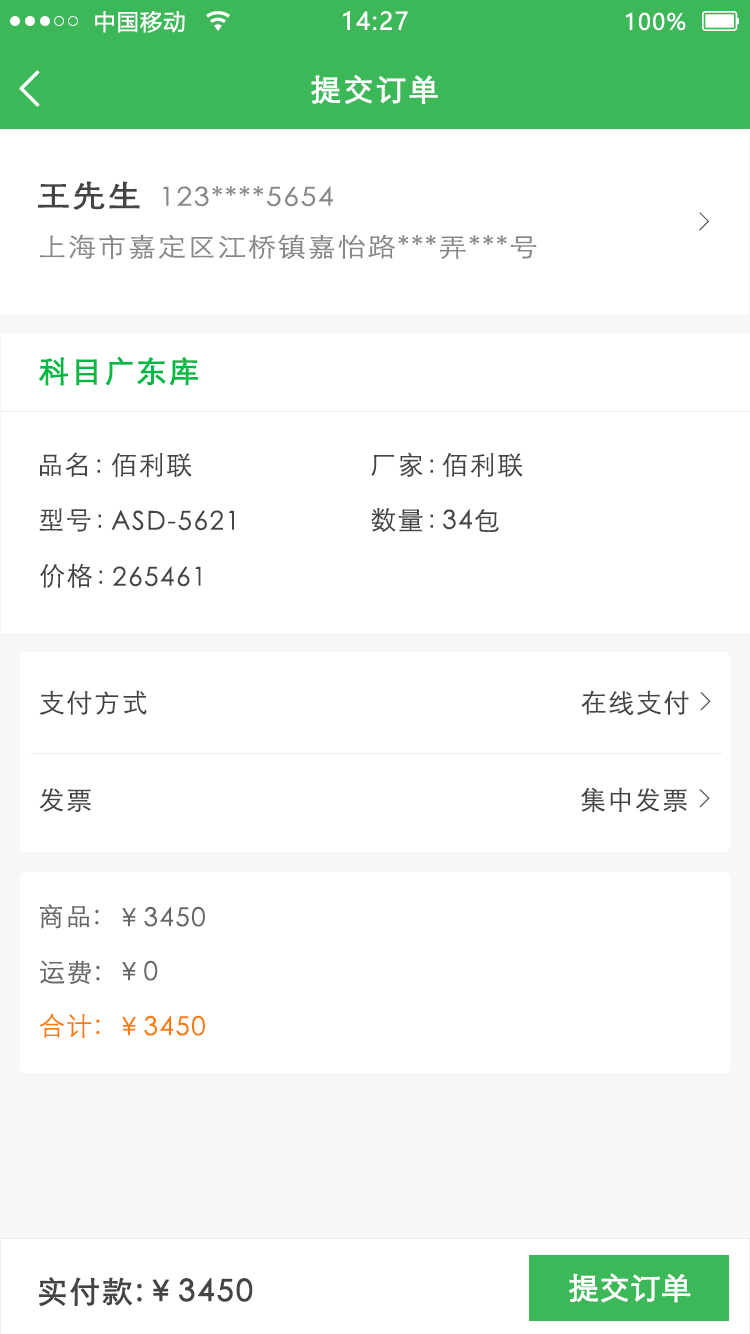
<style>
.page{position:relative;width:750px;height:1334px;background:#ffffff}
.page>*{position:absolute;margin:0}
.t1{font:22px "MicrosoftYaHei";letter-spacing:0.06em;color:#ffffff}
.t2{font:24px "MicrosoftYaHei";letter-spacing:0.06em;color:#ffffff}
.t3{font:49.8px "NSimSun";letter-spacing:0.06em;color:#fefffe;font-weight:bold}
.t4{font:30px "STXihei";letter-spacing:0.06em;color:#fefffe;font-weight:bold}
.t5{font:30px "STXihei";letter-spacing:0.06em;color:#444444;font-weight:bold;scale:1.09 1}
.t6{font:26px "STXihei";letter-spacing:0.06em;color:#888888;scale:1.09 1}
.t7{font:25.9px "NSimSun";letter-spacing:0.06em;color:#444444}
.t8{font:30px "STXihei";letter-spacing:0.06em;color:#00b945;font-weight:bold}
.t9{font:26px "STXihei";letter-spacing:0.06em;color:#444444}
.t10{font:26px "NSimSun";letter-spacing:0.06em;color:#444444}
.t11{font:25.9px "STXihei";letter-spacing:0.06em;color:#666666}
.t12{font:25.9px "STXihei";letter-spacing:0.06em;color:#f97a08}
.t13{font:30px "STXihei";letter-spacing:0.06em;color:#444444;font-weight:bold}
.t14{font:30px "STXihei";color:#ffffff;font-weight:bold}
</style>
<div class="page">
<p class="t1" style="left:95px;top:10px;width:90px;height:23px">中国移动</p>
<p class="t2" style="left:343px;top:11px;width:65px;height:20px">14:27</p>
<p class="t1" style="left:626px;top:12px;width:60px;height:19px">100%</p>
<p class="t3" style="left:19px;top:70px;width:21px;height:37px">&lt;</p>
<p class="t4" style="left:311px;top:75px;width:127px;height:29px">提交订单</p>
<p class="t5" style="left:38px;top:181px;width:102px;height:29px">王先生</p>
<p class="t6" style="left:163px;top:186px;width:170px;height:21px">123****5654</p>
<p class="t7" style="left:699px;top:212px;width:11px;height:19px">&gt;</p>
<p class="t6" style="left:40px;top:234px;width:497px;height:25px">上海市嘉定区江桥镇嘉怡路***弄***号</p>
<p class="t8" style="left:39px;top:356px;width:159px;height:30px">科目广东库</p>
<p class="t9" style="left:40px;top:452px;width:60px;height:25px">品名：</p>
<p class="t9" style="left:111px;top:453px;width:81px;height:24px">佰利联</p>
<p class="t9" style="left:371px;top:452px;width:62px;height:25px">厂家：</p>
<p class="t9" style="left:442px;top:453px;width:81px;height:24px">佰利联</p>
<p class="t9" style="left:39px;top:508px;width:62px;height:24px">型号：</p>
<p class="t9" style="left:111px;top:510px;width:123px;height:21px">ASD-5621</p>
<p class="t9" style="left:371px;top:508px;width:62px;height:24px">数量：</p>
<p class="t9" style="left:443px;top:509px;width:56px;height:23px">34包</p>
<p class="t9" style="left:40px;top:563px;width:62px;height:25px">价格：</p>
<p class="t9" style="left:112px;top:566px;width:89px;height:21px">265461</p>
<p class="t9" style="left:39px;top:690px;width:108px;height:25px">支付方式</p>
<p class="t9" style="left:581px;top:690px;width:130px;height:26px">在线支付 <span class="t10">&gt;</span></p>
<p class="t9" style="left:39px;top:788px;width:52px;height:24px">发票</p>
<p class="t9" style="left:581px;top:787px;width:129px;height:25px">集中发票 <span class="t10">&gt;</span></p>
<p class="t11" style="left:40px;top:904px;width:59px;height:25px">商品:</p>
<p class="t11" style="left:122px;top:906px;width:83px;height:21px">￥3450</p>
<p class="t11" style="left:40px;top:960px;width:60px;height:24px">运费:</p>
<p class="t11" style="left:122px;top:960px;width:36px;height:21px">￥0</p>
<p class="t12" style="left:39px;top:1013px;width:61px;height:25px">合计:</p>
<p class="t12" style="left:122px;top:1015px;width:83px;height:21px">￥3450</p>
<p class="t13" style="left:39px;top:1277px;width:214px;height:30px">实付款:￥3450</p>
<p class="t14" style="left:569px;top:1273px;width:122px;height:30px">提交订单</p>
</div>
